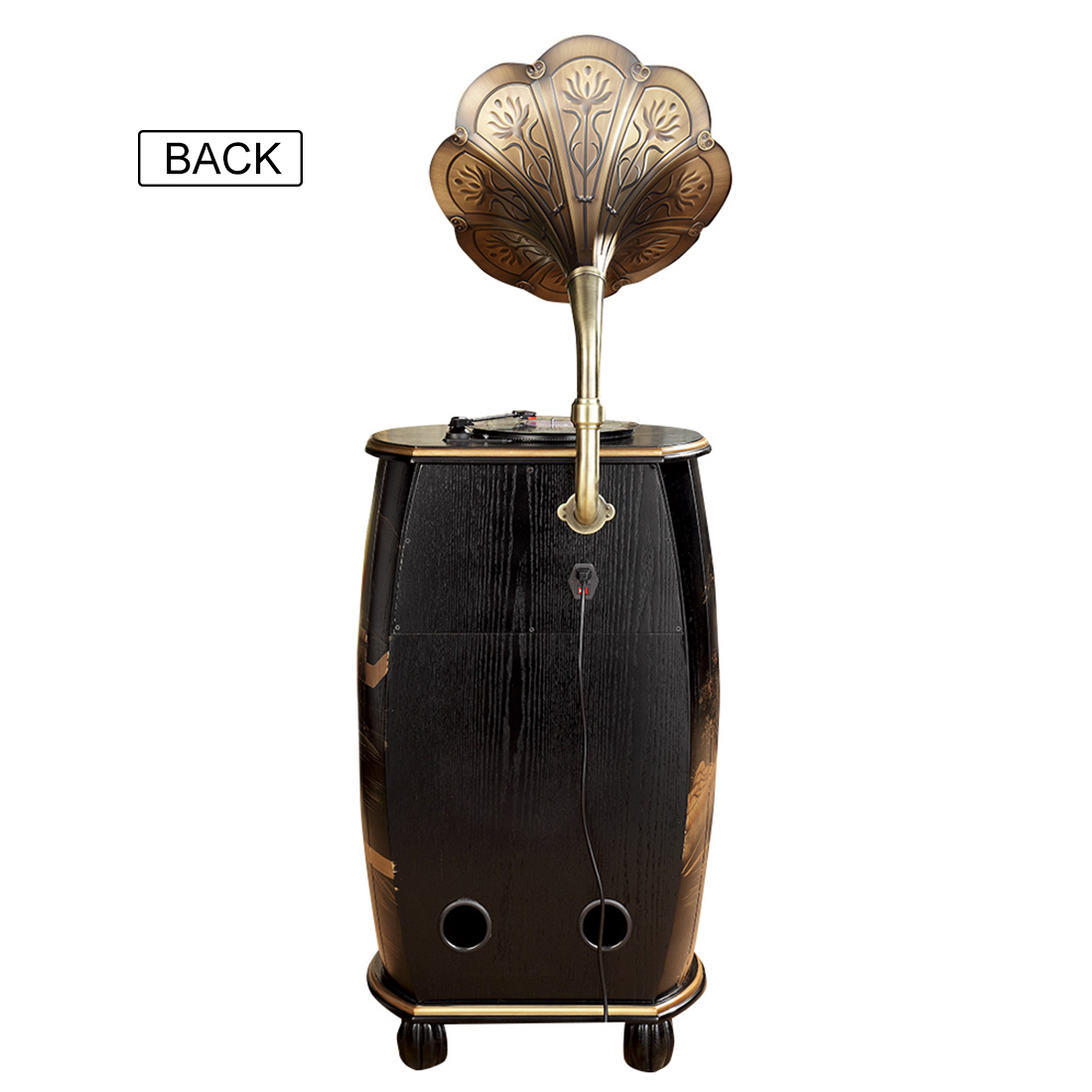
<style>
.page{position:relative;width:1092px;height:1092px;background:#ffffff}
.page>*{position:absolute;margin:0}
.t1{font:43.4px "ArialMT";color:#000000;text-transform:uppercase}
</style>
<div class="page">
<p class="t1" style="left:167px;top:142px;width:115px;height:33px">Back</p>
</div>
